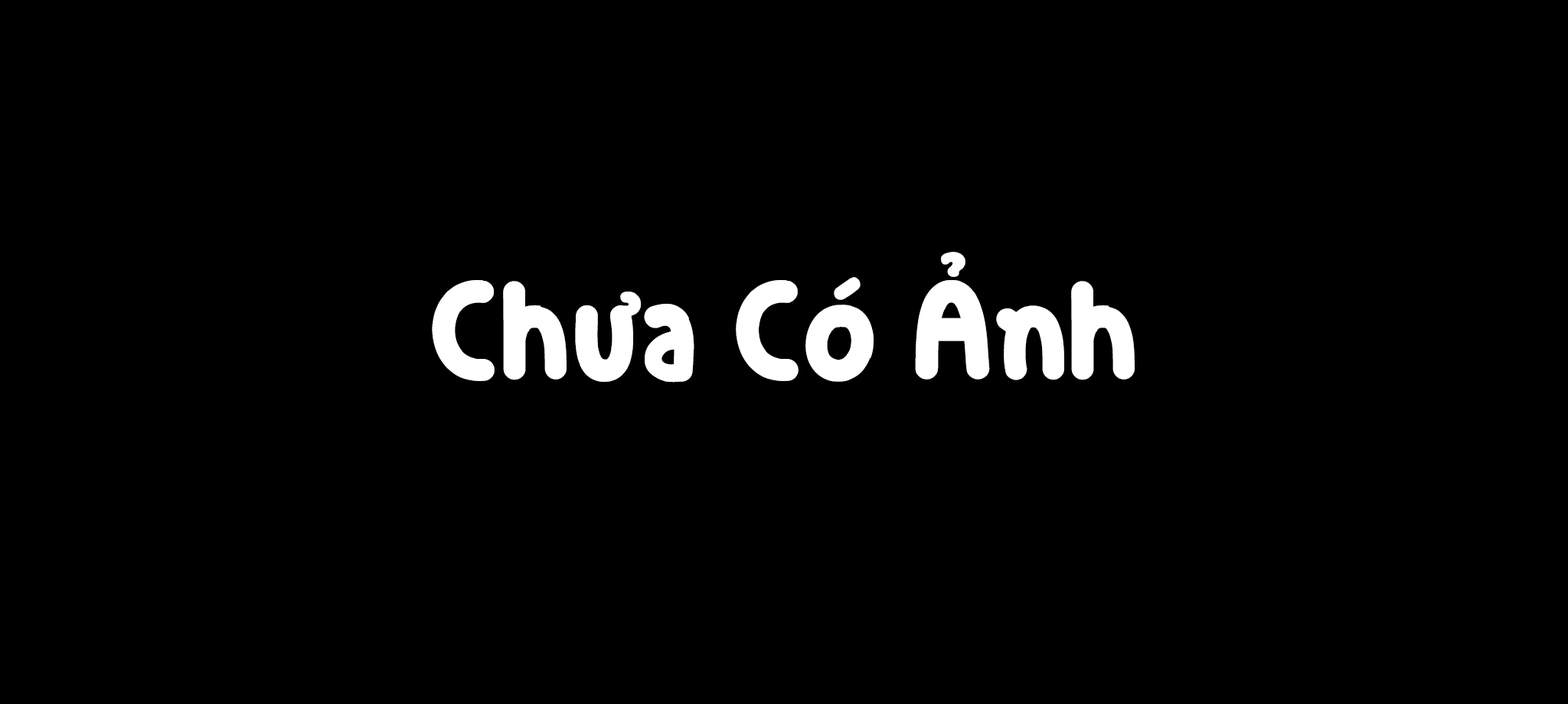
<style>
.page{position:relative;width:1568px;height:704px;background:#000000}
.page>*{position:absolute;margin:0}
.t1{font:153.1px "SVN-WaterBold";color:#ffffff}
</style>
<div class="page">
<p class="t1" style="left:432px;top:252px;width:703px;height:131px">Chưa Có Ảnh</p>
</div>
